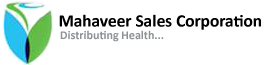
<style>
.page{position:relative;width:264px;height:65px;background:#ffffff}
.page>*{position:absolute;margin:0}
.t1{font:17.3px "Calibri-Bold";color:#000000}
.t2{font:12px "Calibri-Bold";color:#8e9295}
</style>
<div class="page">
<p class="t1" style="left:59px;top:14px;width:202px;height:16px">Mahaveer Sales Corporation</p>
<p class="t2" style="left:60px;top:30px;width:104px;height:12px">Distributing Health...</p>
</div>
